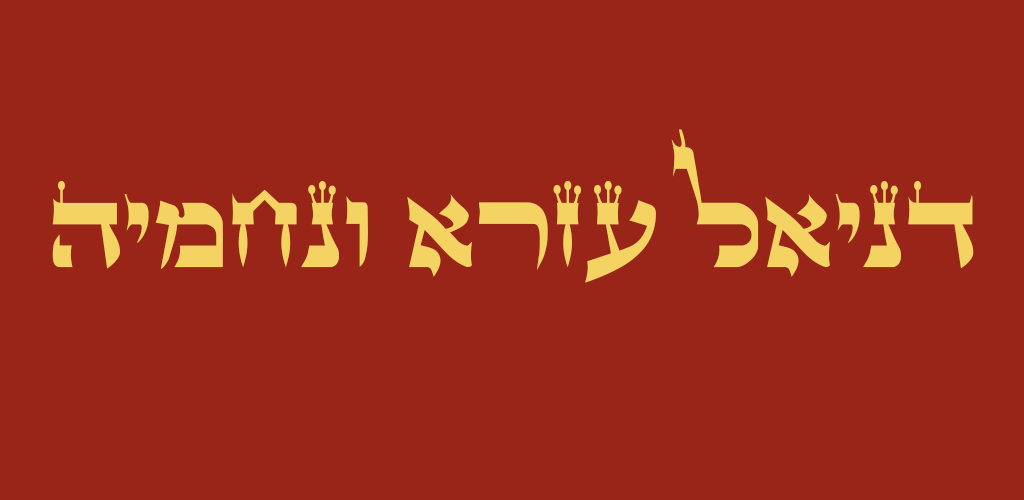
<style>
.page{position:relative;width:1024px;height:500px;background:#992518}
.page>*{position:absolute;margin:0}
.t1{font:125px "StamAshkenazCLM";color:#f5d362}
</style>
<div class="page">
<p class="t1" style="left:52px;top:129px;width:922px;height:154px">הימחנו ארזע לאינד</p>
</div>
